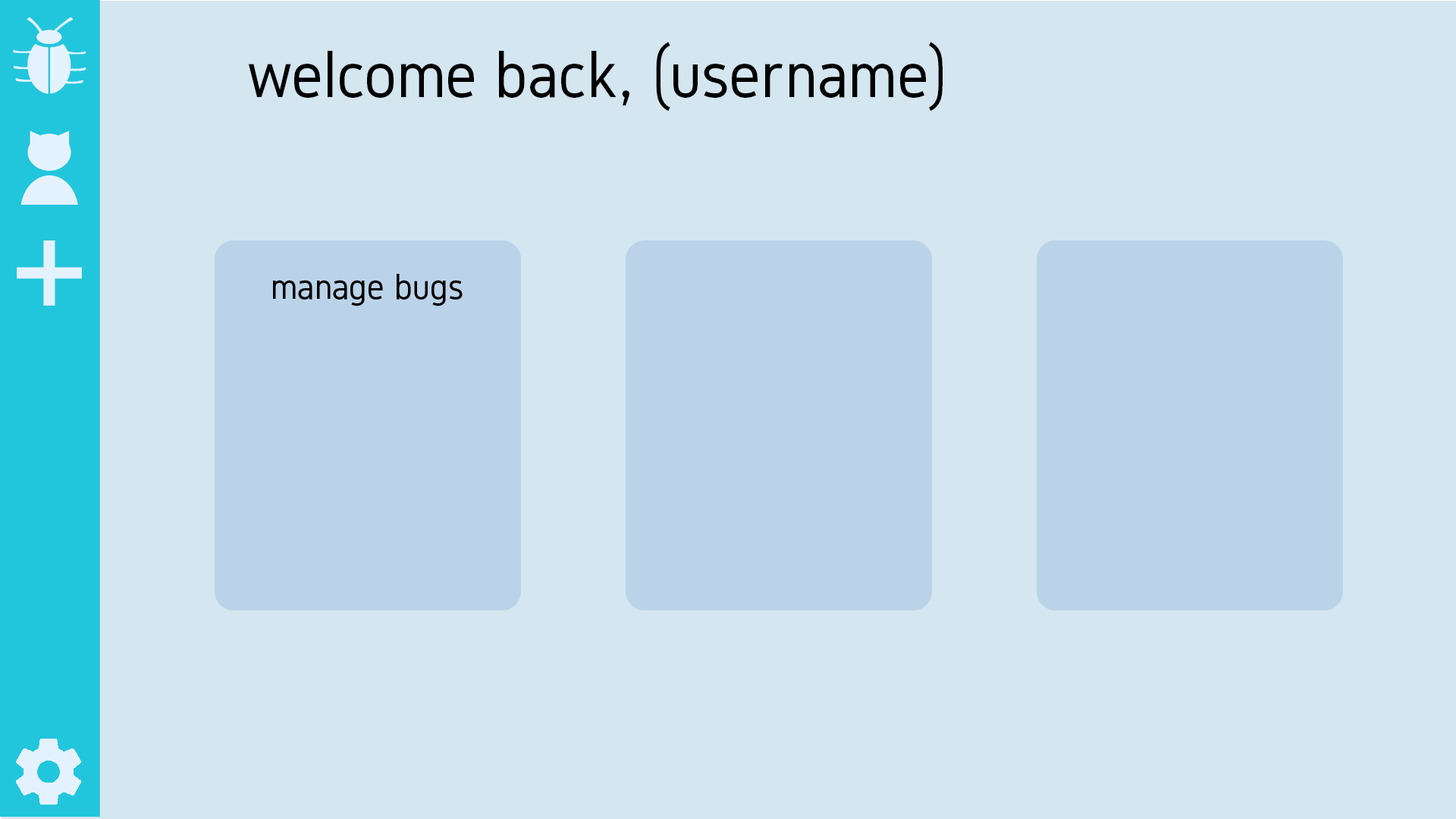
<style>
.page{position:relative;width:1456px;height:819px;background:#d4e6f0}
.page>*{position:absolute;margin:0}
.t1{font:69.2px "Gidole-Regular";color:#000000}
</style>
<div class="page">
<p class="t1" style="left:248px;top:42px;width:695px;height:69px">welcome back, (username)</p>
</div>
